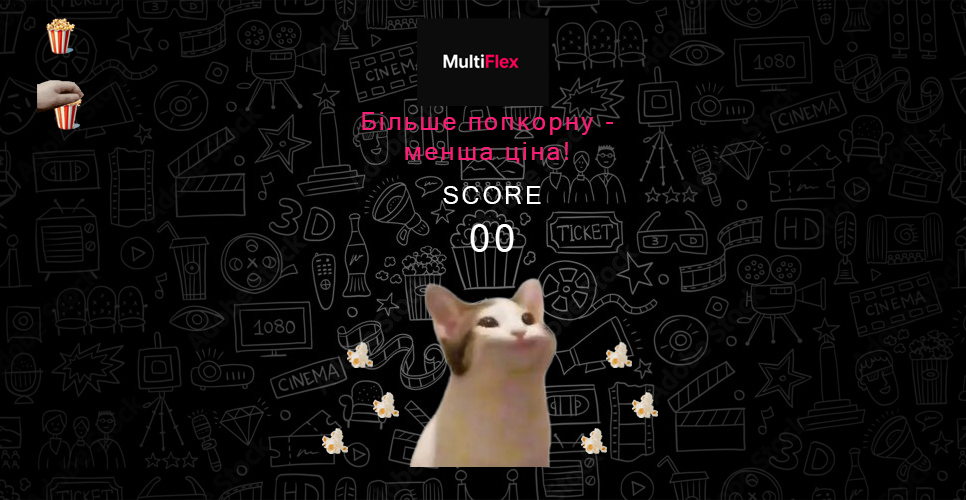
<style>
.page{position:relative;width:966px;height:500px;background:#000000}
.page>*{position:absolute;margin:0}
.t1{font:25px "MicrosoftSansSerif";letter-spacing:0.1em;color:#f71e75}
.t2{font:25px "MicrosoftSansSerif";letter-spacing:0.1em;color:#ffffff}
.t3{font:37.5px "MicrosoftSansSerif";letter-spacing:0.1em;color:#ffffff}
</style>
<div class="page">
<p class="t1" style="left:362px;top:112px;width:251px;height:51px;text-align:center">Більше попкорну - менша ціна!</p>
<p class="t2" style="left:443px;top:186px;width:98px;height:18px">SCORE</p>
<p class="t3" style="left:470px;top:224px;width:44px;height:28px">00</p>
</div>
